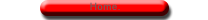
<style>
.page{position:relative;width:208px;height:20px;background:#ffffff}
.page>*{position:absolute;margin:0}
.t1{font:10px "ArialMT";letter-spacing:0.025em;color:#666666}
</style>
<div class="page">
<p class="t1" style="left:90px;top:2px;width:30px;height:8px">Home.</p>
</div>
